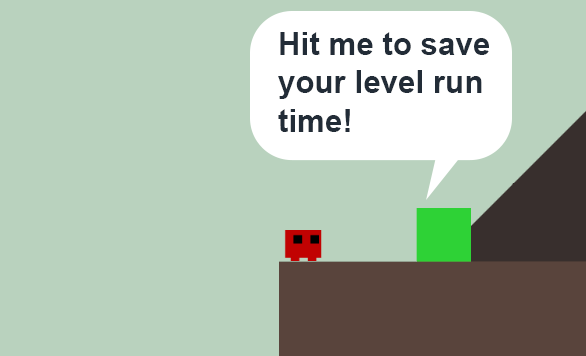
<style>
.page{position:relative;width:586px;height:356px;background:#b9d2be}
.page>*{position:absolute;margin:0}
.t1{font:32px "Arial-BoldMT";color:#222c37}
</style>
<div class="page">
<p class="t1" style="left:278px;top:32px;width:211px;height:100px">Hit me to save your level run time!</p>
</div>
